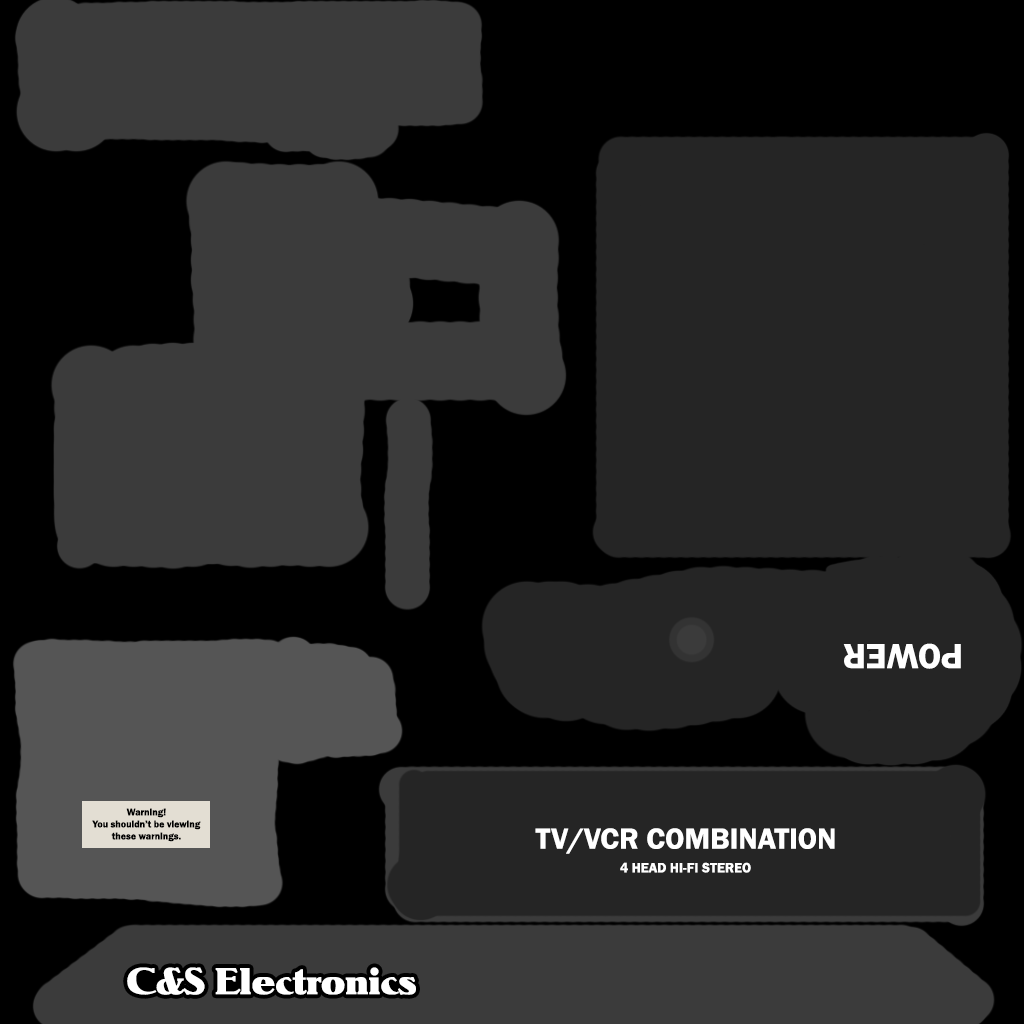
<style>
.page{position:relative;width:1024px;height:1024px;background:#252525}
.page>*{position:absolute;margin:0}
.t1{font:36px "FranklinGothic-Demi";color:#ffffff}
.t2{font:10px "FranklinGothic-Demi";color:#000000}
.t3{font:30px "FranklinGothic-Demi";color:#ffffff}
.t4{font:14px "FranklinGothic-Demi";color:#ffffff}
.t5{font:36px "Notram";color:#ffffff}
</style>
<div class="page">
<p class="t1" style="left:843px;top:643px;width:118px;height:26px;rotate:180deg">POWER</p>
<p class="t2" style="left:92px;top:808px;width:109px;height:34px;text-align:center">Warning!<br>You shouldn’t be viewing<br>these warnings.</p>
<p class="t3" style="left:535px;top:828px;width:300px;height:26px">TV/VCR COMBINATION</p>
<p class="t4" style="left:620px;top:862px;width:131px;height:11px">4 HEAD HI-FI STEREO</p>
<p class="t5" style="left:127px;top:967px;width:289px;height:28px">C&amp;S Electronics</p>
</div>
